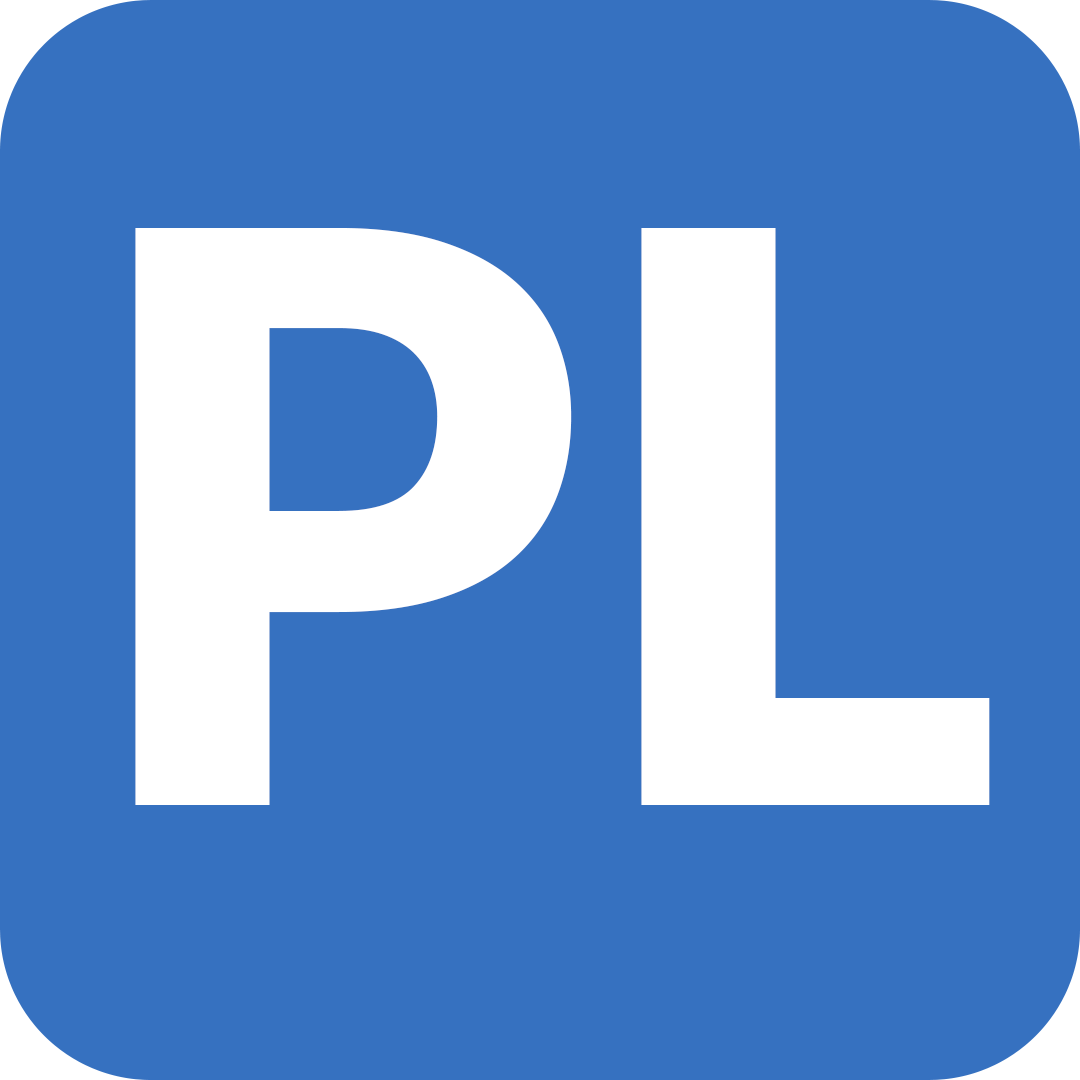
<style>
.page{position:relative;width:1080px;height:1080px;background:#3671c0}
.page>*{position:absolute;margin:0}
.t1{font:792.1px "Lato-Black";color:#ffffff}
</style>
<div class="page">
<p class="t1" style="left:135px;top:228px;width:855px;height:577px">PL</p>
</div>
